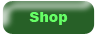
<style>
.page{position:relative;width:97px;height:35px;background:#276027}
.page>*{position:absolute;margin:0}
.t1{font:14px "Arial-Black";color:#66ff66}
</style>
<div class="page">
<p class="t1" style="left:27px;top:10px;width:57px;height:19px">Shop</p>
</div>
